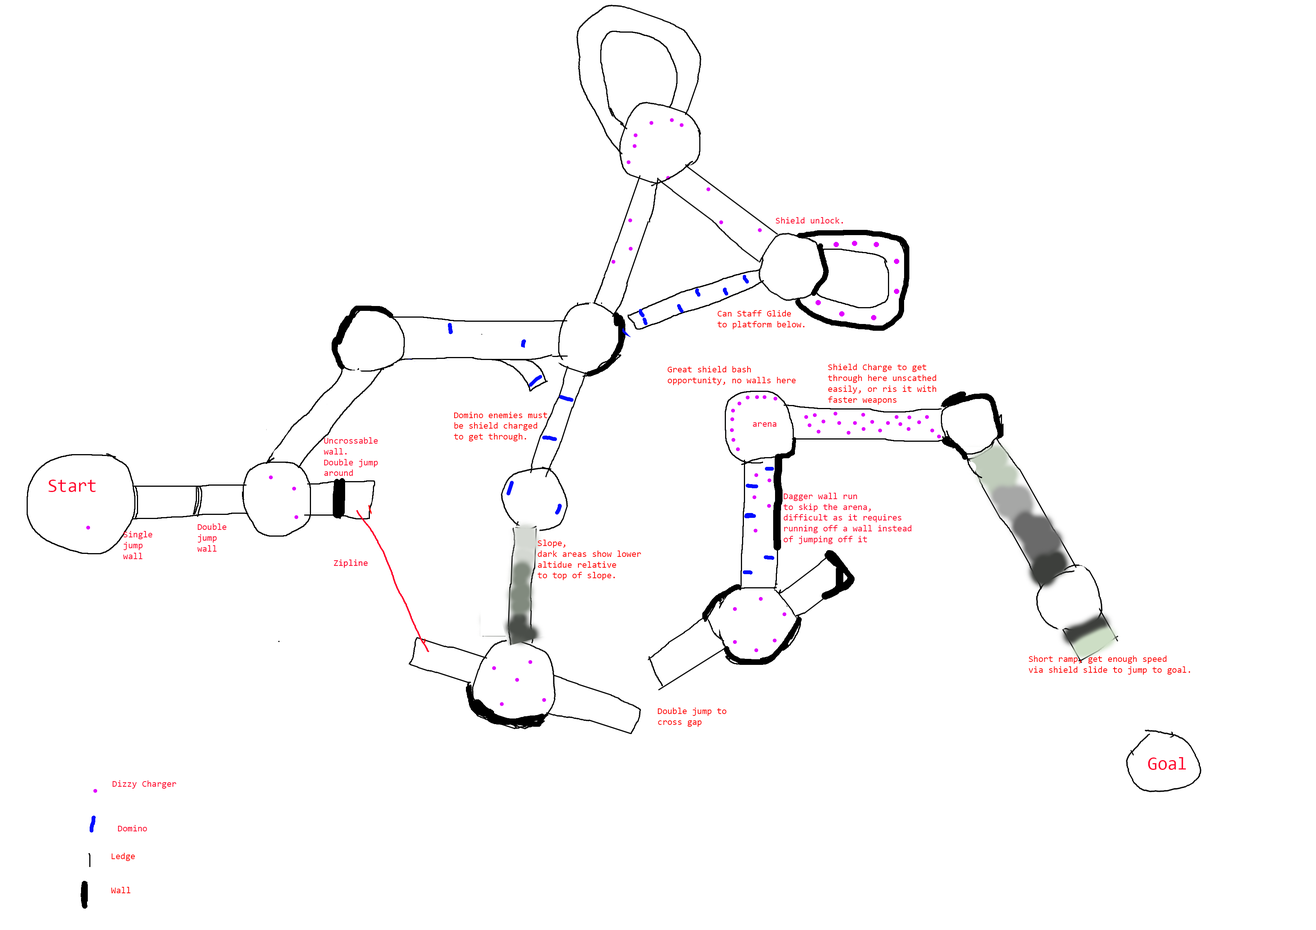
<style>
.page{position:relative;width:1316px;height:930px;background:#ffffff}
.page>*{position:absolute;margin:0}
.t1{font:9px "Consolas";color:#ff002a}
.t2{font:9px "Consolas";color:#ff0000}
.t3{font:18px "Consolas";color:#ff002a}
</style>
<div class="page">
<p class="t1" style="left:776px;top:217px;width:67px;height:7px">Shield unlock.</p>
<p class="t2" style="left:717px;top:310px;width:87px;height:19px">Can Staff Glide<br>to platform below.</p>
<p class="t2" style="left:667px;top:366px;width:128px;height:19px">Great shield bash<br>opportunity, no walls here</p>
<p class="t2" style="left:828px;top:364px;width:108px;height:41px">Shield Charge to get<br>through here unscathed<br>easily, or ris it with<br>faster weapons</p>
<p class="t2" style="left:454px;top:412px;width:93px;height:29px">Domino enemies must<br>be shield charged<br>to get through.</p>
<p class="t1" style="left:753px;top:422px;width:23px;height:5px">arena</p>
<p class="t1" style="left:324px;top:437px;width:54px;height:39px">Uncrossable<br>wall.<br>Double jump<br>around</p>
<p class="t3" style="left:48px;top:480px;width:48px;height:12px">Start</p>
<p class="t1" style="left:783px;top:493px;width:128px;height:51px">Dagger wall run<br>to skip the arena,<br>difficult as it requires<br>running off a wall instead<br>of jumping off it</p>
<p class="t1" style="left:123px;top:531px;width:29px;height:28px">Single<br>jump<br>wall</p>
<p class="t1" style="left:197px;top:524px;width:29px;height:28px">Double<br>jump<br>wall</p>
<p class="t2" style="left:537px;top:540px;width:104px;height:40px">Slope,<br>dark areas show lower<br>altidue relative<br>to top of slope.</p>
<p class="t2" style="left:1028px;top:656px;width:162px;height:19px">Short ramp, get enough speed<br>via shield slide to jump to goal.</p>
<p class="t2" style="left:657px;top:708px;width:69px;height:19px">Double jump to<br>cross gap</p>
<p class="t3" style="left:1148px;top:757px;width:37px;height:13px">Goal</p>
<p class="t1" style="left:112px;top:780px;width:64px;height:9px">Dizzy Charger</p>
<p class="t1" style="left:118px;top:825px;width:29px;height:6px">Domino</p>
<p class="t2" style="left:111px;top:853px;width:24px;height:8px">Ledge</p>
<p class="t2" style="left:111px;top:887px;width:19px;height:6px">Wall</p>
</div>
